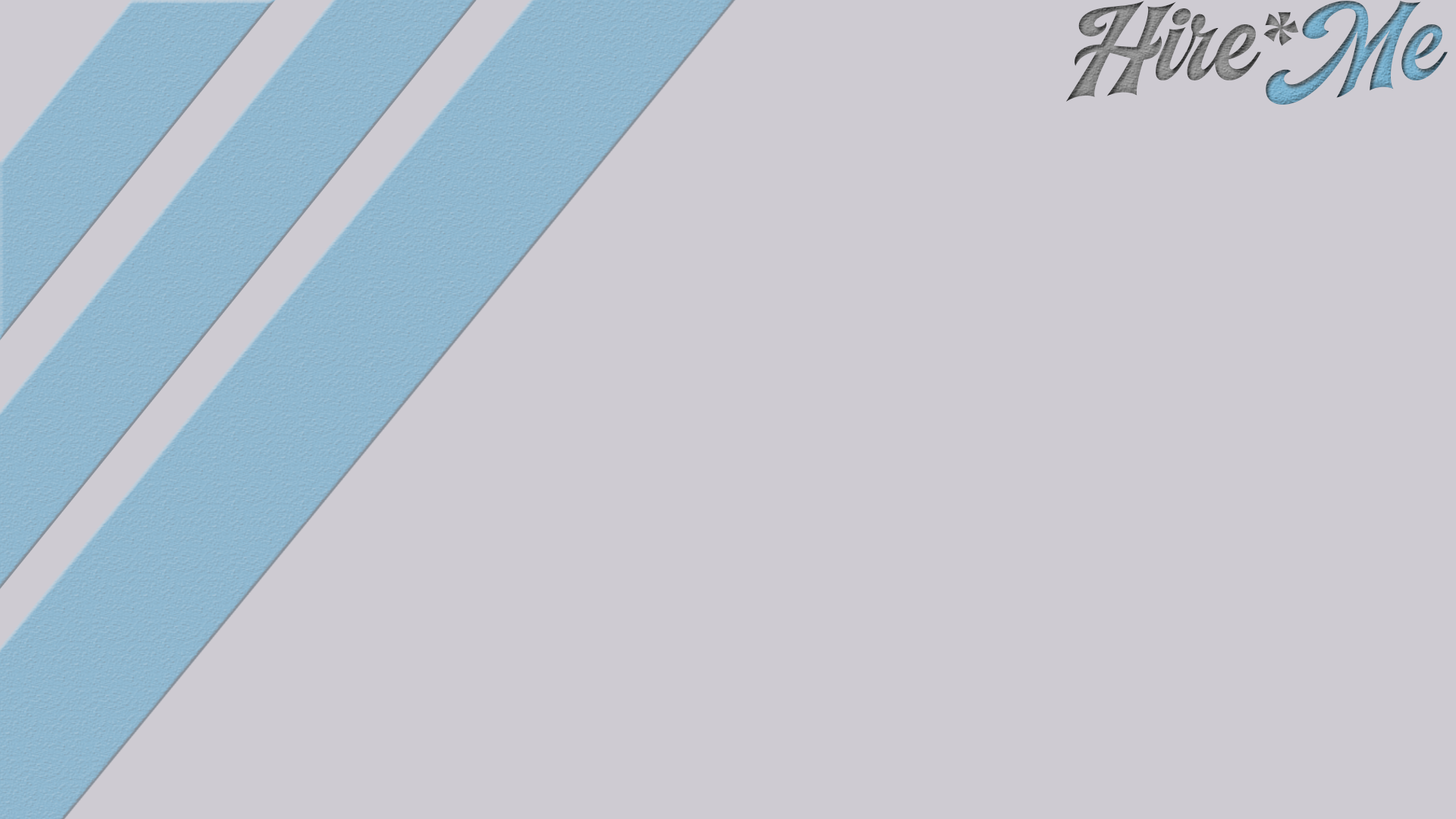
<style>
.page{position:relative;width:1456px;height:819px;background:#cecbd2}
.page>*{position:absolute;margin:0}
.t1{font:90.9px "MachineryScriptPERSONALUSE-Regular"}
</style>
<div class="page">
<p class="t1" style="left:1065px;top:1px;width:383px;height:104px">Hire*Me</p>
</div>
